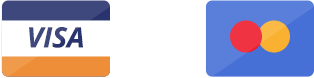
<style>
.page{position:relative;width:314px;height:78px;background:#ffffff}
.page>*{position:absolute;margin:0}
.t1{font:28px "OpenSans-BoldItalic";color:#29336e}
</style>
<div class="page">
<p class="t1" style="left:29px;top:27px;width:54px;height:21px">VISA</p>
</div>
